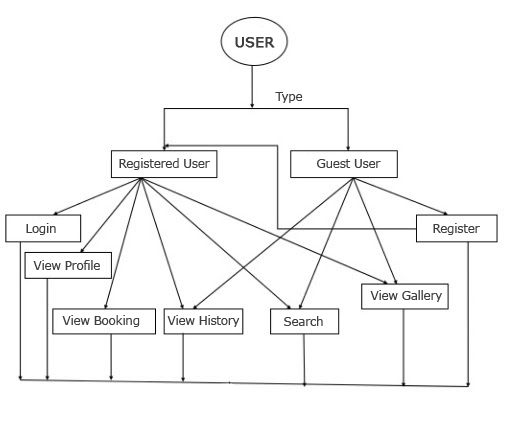
<style>
.page{position:relative;width:515px;height:423px;background:#ffffff}
.page>*{position:absolute;margin:0}
.t1{font:14px "Verdana";color:#403d3d;font-weight:bold}
.t2{font:12px "Verdana";letter-spacing:-0.025em;color:#403d3d}
</style>
<div class="page">
<p class="t1" style="left:235px;top:37px;width:40px;height:11px">USER</p>
<p class="t2" style="left:275px;top:92px;width:28px;height:11px">Type</p>
<p class="t2" style="left:119px;top:158px;width:91px;height:12px">Registered User</p>
<p class="t2" style="left:317px;top:159px;width:64px;height:9px">Guest User</p>
<p class="t2" style="left:26px;top:223px;width:30px;height:12px">Login</p>
<p class="t2" style="left:433px;top:223px;width:47px;height:12px">Register</p>
<p class="t2" style="left:33px;top:260px;width:67px;height:10px">View Profile</p>
<p class="t2" style="left:370px;top:290px;width:72px;height:12px">View Gallery</p>
<p class="t2" style="left:62px;top:315px;width:78px;height:12px">View Booking</p>
<p class="t2" style="left:167px;top:315px;width:73px;height:12px">View History</p>
<p class="t2" style="left:284px;top:316px;width:39px;height:10px">Search</p>
</div>
